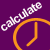
<style>
.page{position:relative;width:50px;height:50px;background:#62035d}
.page>*{position:absolute;margin:0}
.t1{font:12px "Arial-BoldMT";letter-spacing:-0.04em;color:#fcfcf8}
</style>
<div class="page">
<p class="t1" style="left:1px;top:2px;width:41px;height:29px;rotate:-32deg">calculate</p>
</div>
